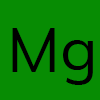
<style>
.page{position:relative;width:100px;height:100px;background:#078c03}
.page>*{position:absolute;margin:0}
.t1{font:62.5px "Muli-Regular";color:#000000}
</style>
<div class="page">
<p class="t1" style="left:12px;top:28px;width:81px;height:57px">Mg</p>
</div>
